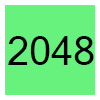
<style>
.page{position:relative;width:100px;height:100px;background:#67f27e}
.page>*{position:absolute;margin:0}
.t1{font:40px "MicrosoftSansSerif";color:#000407}
</style>
<div class="page">
<p class="t1" style="left:8px;top:36px;width:86px;height:29px">2048</p>
</div>
